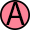
<style>
.page{position:relative;width:30px;height:30px;background:#fd8498}
.page>*{position:absolute;margin:0}
.t1{font:33.3px "MyriadPro-Regular";color:#000000}
</style>
<div class="page">
<p class="t1" style="left:6px;top:2px;width:19px;height:23px">A</p>
</div>
